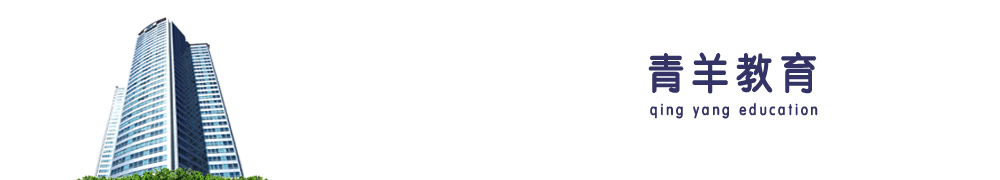
<style>
.page{position:relative;width:1000px;height:180px;background:#ffffff}
.page>*{position:absolute;margin:0}
.t1{font:42px "FZY3JW--GB1-0";letter-spacing:0.2em;color:#333366;font-weight:bold;scale:0.86 1}
.t2{font:15.4px "FZY3JW--GB1-0";letter-spacing:0.2em;color:#333366;font-weight:bold;scale:0.86 1}
</style>
<div class="page">
<p class="t1" style="left:648px;top:51px;width:169px;height:43px">青羊教育</p>
<p class="t2" style="left:650px;top:102px;width:168px;height:17px">qing yang education</p>
</div>
